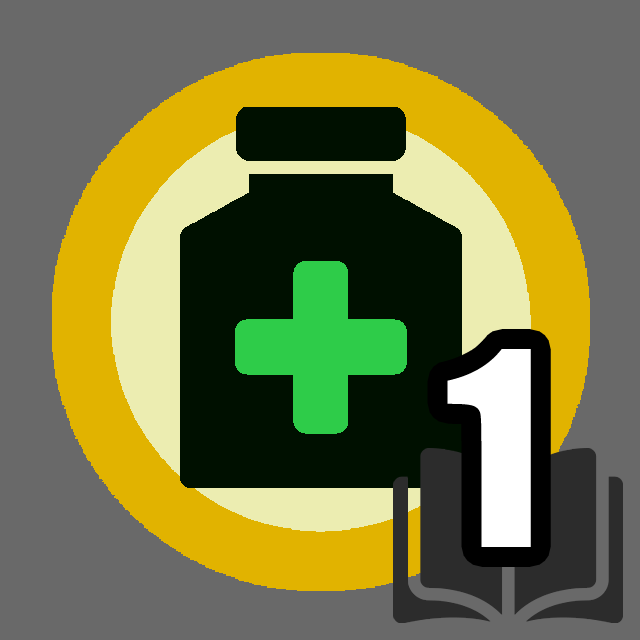
<style>
.page{position:relative;width:640px;height:640px;background:#696969}
.page>*{position:absolute;margin:0}
.t1{font:250px "Impact";color:#ffffff}
</style>
<div class="page">
<p class="t1" style="left:447px;top:349px;width:84px;height:198px">1</p>
</div>
